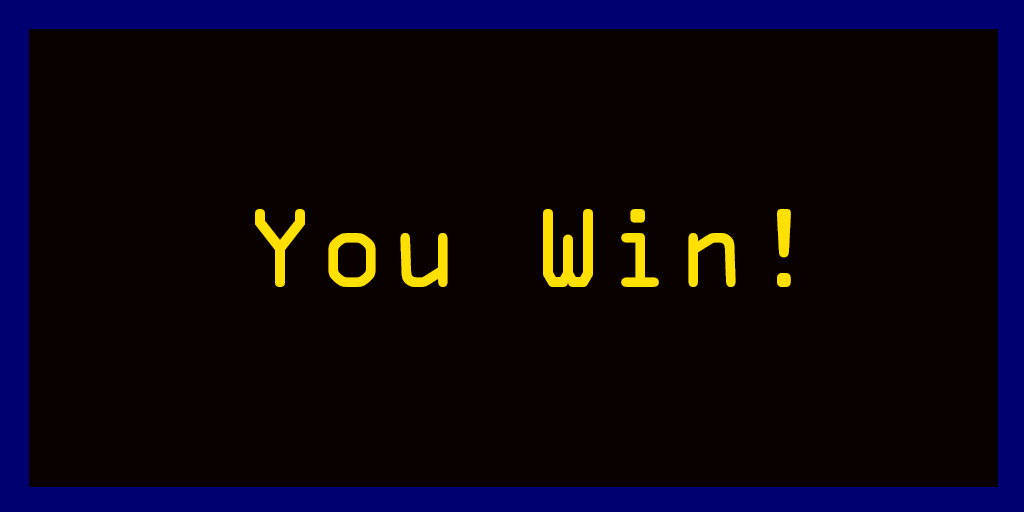
<style>
.page{position:relative;width:1024px;height:512px;background:#090000}
.page>*{position:absolute;margin:0}
.t1{font:100px "OCRAStd";color:#ffe000}
</style>
<div class="page">
<p class="t1" style="left:255px;top:209px;width:536px;height:78px">You Win!</p>
</div>
